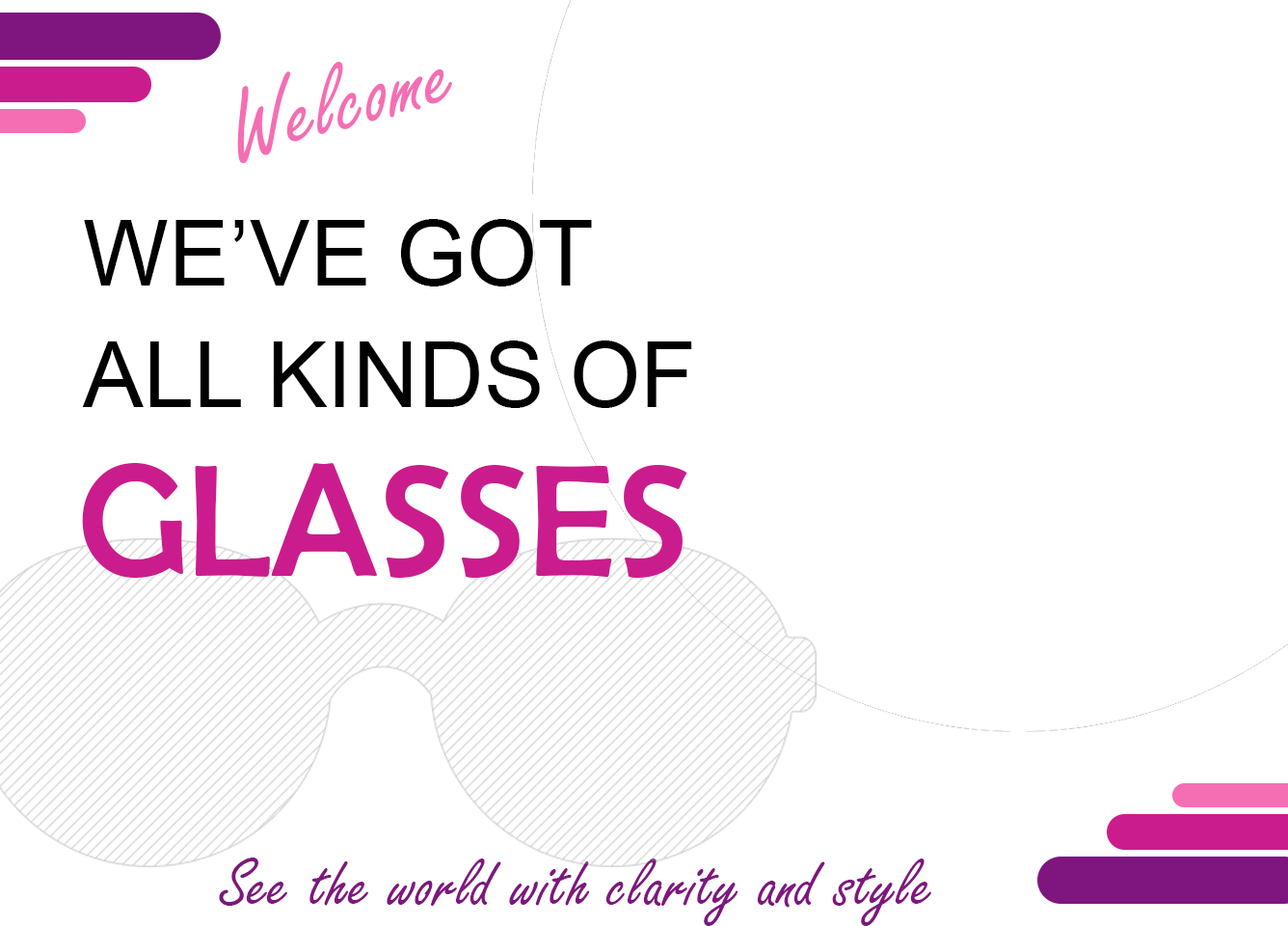
<style>
.page{position:relative;width:1288px;height:926px;background:#ffffff}
.page>*{position:absolute;margin:0}
.t1{font:106.1px "FreestyleScript-Regular";color:#f56eb3}
.t2{font:91.2px/121.6px "ArialMT";color:#000000}
.t3{font:161.4px "BerlinSansFB-Reg";color:#cb1c8d}
.t4{font:73.2px "FreestyleScript-Regular";color:#7f167f}
</style>
<div class="page">
<p class="t1" style="left:237px;top:61px;width:215px;height:103px;rotate:-15deg">Welcome</p>
<p class="t2" style="left:82px;top:219px;width:610px;height:189px">WE’VE GOT<br>ALL KINDS OF</p>
<p class="t3" style="left:82px;top:463px;width:605px;height:115px">GLASSES</p>
<p class="t4" style="left:219px;top:857px;width:712px;height:69px">See the world with clarity and style</p>
</div>
